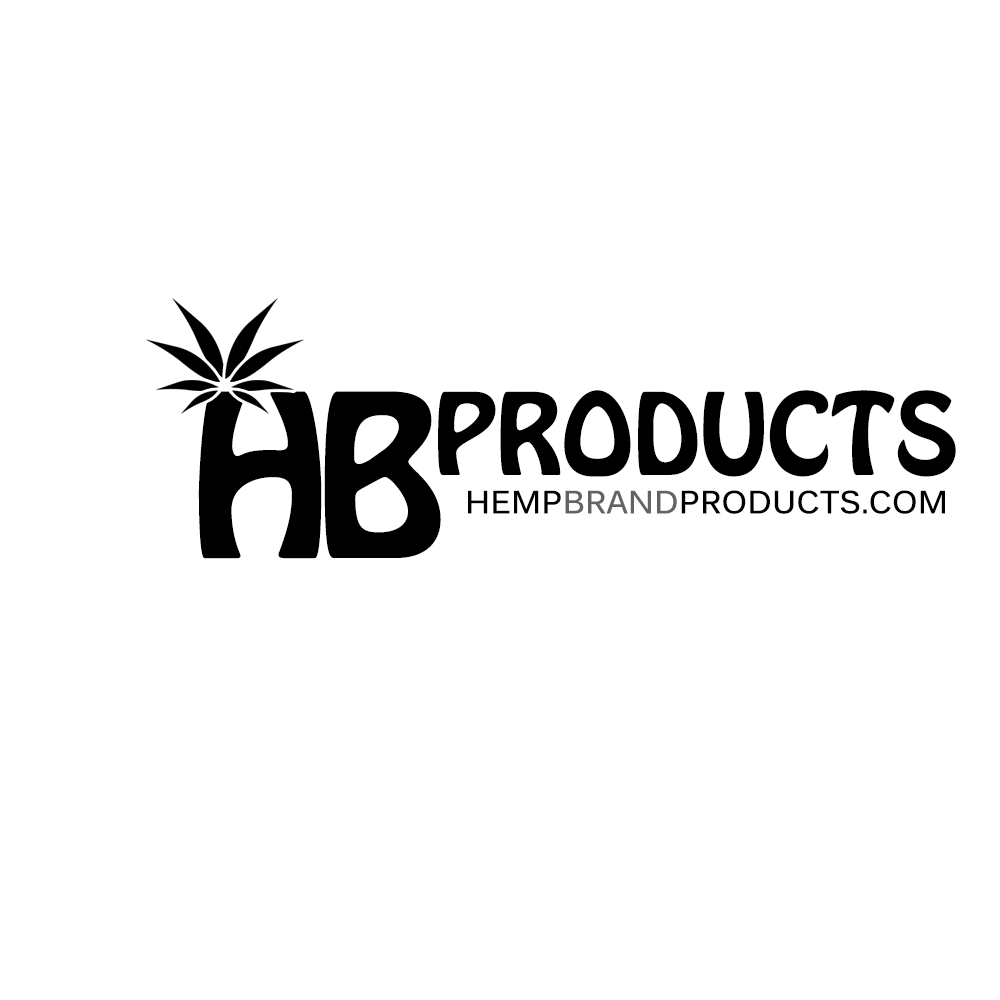
<style>
.page{position:relative;width:1000px;height:1000px;background:#ffffff}
.page>*{position:absolute;margin:0}
.t1{font:100px "HoboStd";color:#000000}
.t2{font:200px "HoboStd";color:#000000}
.t3{font:32px "Kalinga-Bold";color:#000000}
.t4{font:32px "Kalinga-Bold";color:#636363}
</style>
<div class="page">
<p class="t1" style="left:438px;top:390px;width:518px;height:87px">PRODUCTS</p>
<p class="t2" style="left:198px;top:391px;width:124px;height:168px">H</p>
<p class="t2" style="left:324px;top:391px;width:117px;height:167px">B</p>
<p class="t3" style="left:468px;top:490px;width:477px;height:24px">HEMP<span class="t4">BRAND</span>PRODUCTS.COM</p>
</div>
